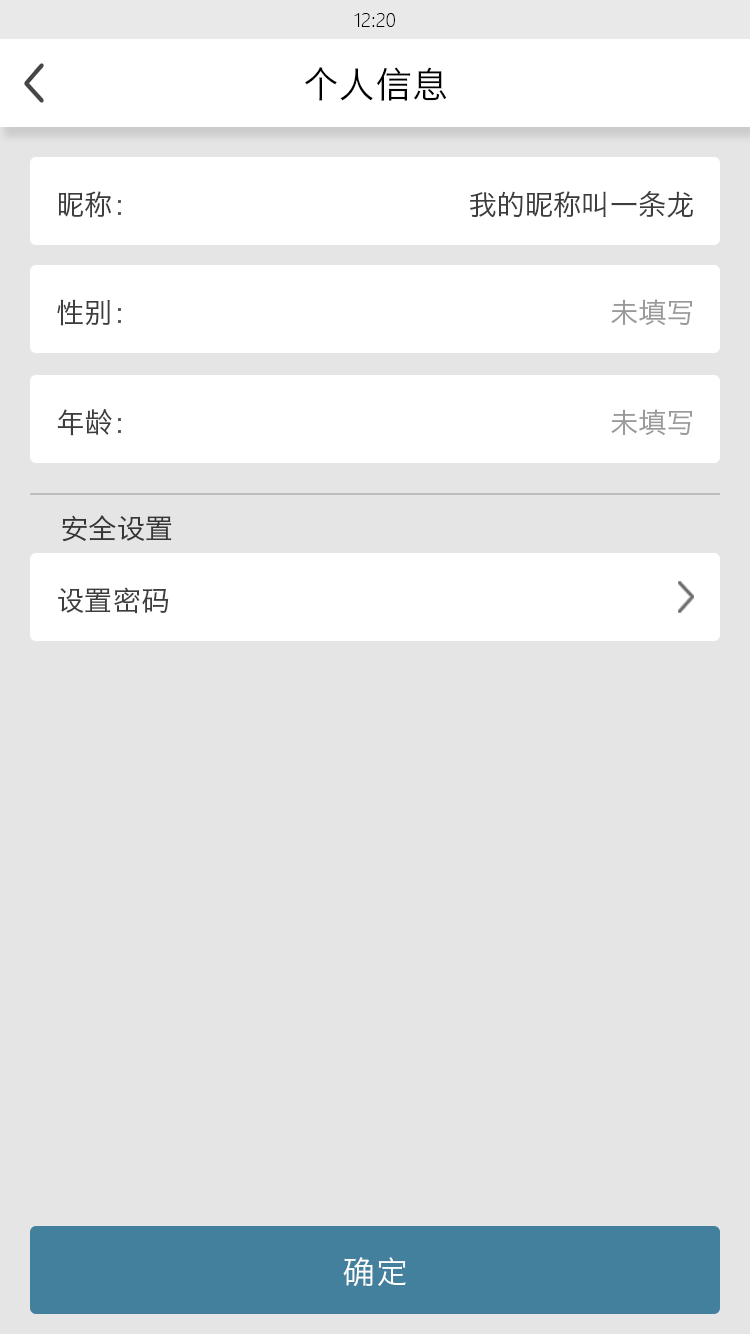
<style>
.page{position:relative;width:750px;height:1334px;background:#e5e5e5}
.page>*{position:absolute;margin:0}
.t1{font:18px "MicrosoftYaHeiLight";color:#000000}
.t2{font:36px "HiraginoSansGB-W3";color:#000000}
.t3{font:28px "HiraginoSansGB-W3";color:#3d3d3d}
.t4{font:28px "HiraginoSansGB-W3";color:#9a9a9a}
.t5{font:28px "HiraginoSansGB-W3";color:#363636}
.t6{font:32px "HiraginoSansGB-W3";color:#ffffff}
</style>
<div class="page">
<p class="t1" style="left:354px;top:13px;width:41px;height:14px">12:20</p>
<p class="t2" style="left:305px;top:67px;width:142px;height:34px">个人信息</p>
<p class="t3" style="left:58px;top:191px;width:63px;height:27px">昵称：</p>
<p class="t3" style="left:470px;top:190px;width:223px;height:28px">我的昵称叫一条龙</p>
<p class="t3" style="left:57px;top:299px;width:64px;height:27px">性别：</p>
<p class="t4" style="left:611px;top:299px;width:82px;height:26px">未填写</p>
<p class="t3" style="left:57px;top:409px;width:64px;height:27px">年龄：</p>
<p class="t4" style="left:611px;top:409px;width:82px;height:26px">未填写</p>
<p class="t5" style="left:62px;top:515px;width:110px;height:27px">安全设置</p>
<p class="t3" style="left:58px;top:587px;width:111px;height:27px">设置密码</p>
<p class="t6" style="left:343px;top:1257px;width:63px;height:30px">确定</p>
</div>
